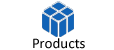
<style>
.page{position:relative;width:114px;height:50px;background:#ffffff}
.page>*{position:absolute;margin:0}
.t1{font:14.5px "Calibri";color:#000000;scale:1.03 1}
</style>
<div class="page">
<p class="t1" style="left:33px;top:38px;width:52px;height:11px">Products</p>
</div>
